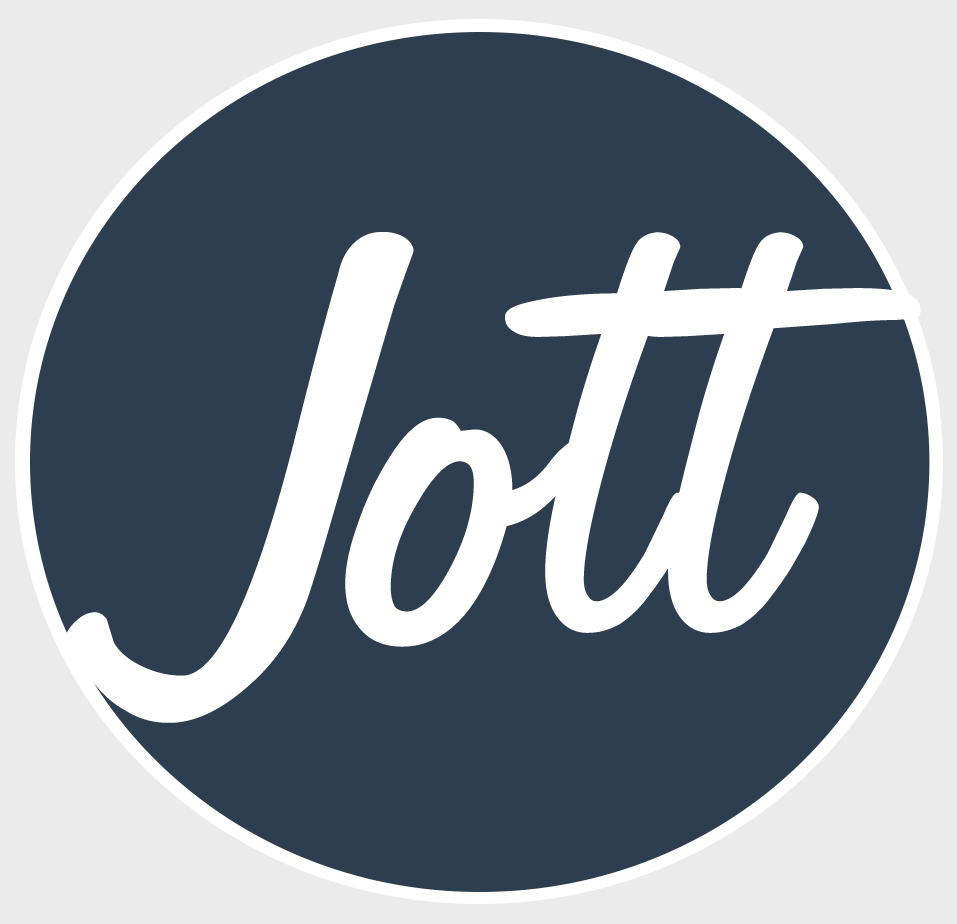
<style>
.page{position:relative;width:957px;height:924px;background:#2c3e50}
.page>*{position:absolute;margin:0}
.t1{font:771.9px "Jott45Normal";letter-spacing:0.01em;color:#ffffff}
</style>
<div class="page">
<p class="t1" style="left:64px;top:232px;width:350px;height:491px">J</p>
<p class="t1" style="left:345px;top:232px;width:576px;height:415px">ott</p>
</div>
